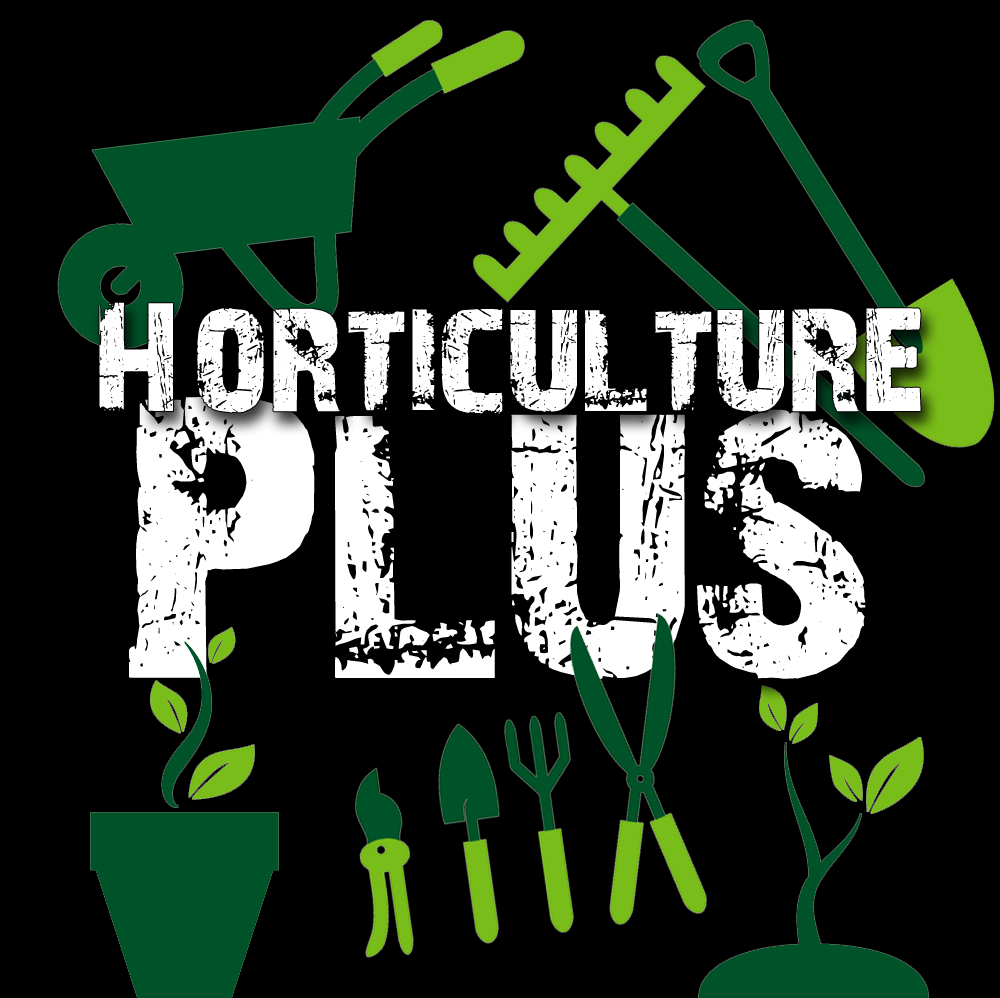
<style>
.page{position:relative;width:1000px;height:998px;background:#000000}
.page>*{position:absolute;margin:0}
.t1{font:153.7px "28DaysLater";color:#ffffff}
.t2{font:400px "28DaysLater";color:#ffffff}
</style>
<div class="page">
<p class="t1" style="left:99px;top:302px;width:822px;height:112px">Horticulture</p>
<p class="t2" style="left:129px;top:397px;width:737px;height:282px">Plus</p>
</div>
